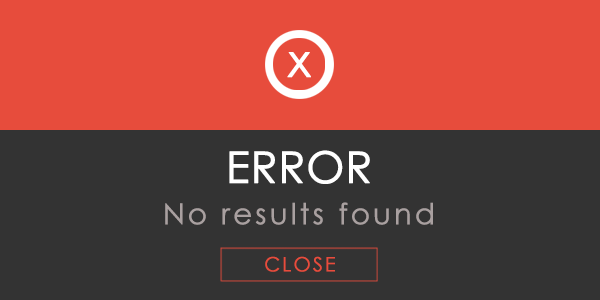
<style>
.page{position:relative;width:600px;height:300px;background:#333333}
.page>*{position:absolute;margin:0}
.t1{font:46.3px "CenturyGothic";color:#ffffff;font-weight:bold}
.t2{font:43.6px "CenturyGothic";color:#ffffff;font-weight:bold}
.t3{font:29.1px "CenturyGothic";letter-spacing:0.08em;color:#a9a0a0;font-weight:bold}
.t4{font:19.9px "CenturyGothic";letter-spacing:0.08em;color:#e74c3c;font-weight:bold}
</style>
<div class="page">
<p class="t1" style="left:287px;top:52px;width:24px;height:26px">x</p>
<p class="t2" style="left:229px;top:150px;width:141px;height:34px">ERROR</p>
<p class="t3" style="left:165px;top:202px;width:268px;height:23px">No results found</p>
<p class="t4" style="left:265px;top:256px;width:70px;height:16px">CLOSE</p>
</div>
